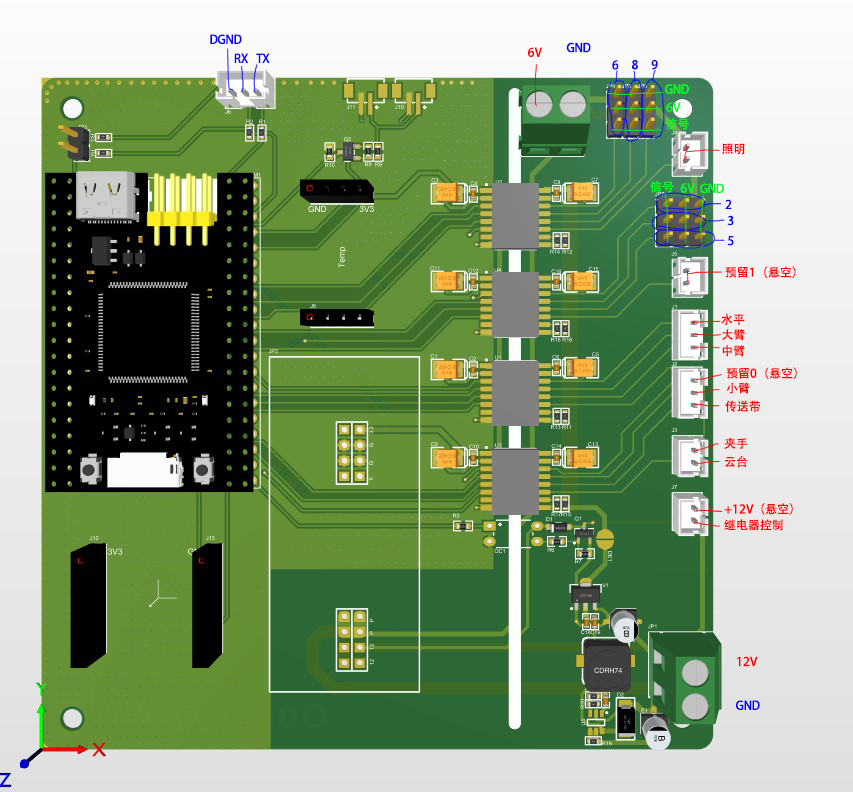
<style>
.page{position:relative;width:853px;height:792px}
.page>*{position:absolute;margin:0}
.t1{font:12px "AdobeHeitiStd-Regular";color:#0600ff}
.t2{font:12px "AdobeHeitiStd-Regular";color:#ff0000}
.t3{font:12px "AdobeHeitiStd-Regular";color:#00ff1e}
</style>
<div class="page">
<p class="t1" style="left:210px;top:34px;width:32px;height:10px">DGND</p>
<p class="t1" style="left:234px;top:53px;width:14px;height:10px">RX</p>
<p class="t1" style="left:256px;top:53px;width:14px;height:10px">TX</p>
<p class="t2" style="left:528px;top:47px;width:15px;height:10px">6V</p>
<p class="t1" style="left:566px;top:42px;width:25px;height:11px">GND</p>
<p class="t1" style="left:612px;top:60px;width:7px;height:10px">6</p>
<p class="t1" style="left:632px;top:60px;width:6px;height:10px">8</p>
<p class="t1" style="left:651px;top:59px;width:7px;height:11px">9</p>
<p class="t3" style="left:665px;top:84px;width:24px;height:10px">GND</p>
<p class="t3" style="left:666px;top:102px;width:15px;height:11px">6V</p>
<p class="t3" style="left:665px;top:118px;width:24px;height:12px">信号</p>
<p class="t2" style="left:722px;top:143px;width:23px;height:12px">照明</p>
<p class="t3" style="left:650px;top:181px;width:24px;height:12px">信号</p>
<p class="t3" style="left:680px;top:183px;width:15px;height:10px">6V</p>
<p class="t3" style="left:700px;top:183px;width:24px;height:11px">GND</p>
<p class="t1" style="left:725px;top:199px;width:7px;height:10px">2</p>
<p class="t1" style="left:727px;top:215px;width:7px;height:11px">3</p>
<p class="t1" style="left:727px;top:236px;width:7px;height:10px">5</p>
<p class="t2" style="left:725px;top:266px;width:71px;height:12px">预留1（悬空）</p>
<p class="t2" style="left:721px;top:313px;width:24px;height:12px">水平</p>
<p class="t2" style="left:722px;top:329px;width:23px;height:12px">大臂</p>
<p class="t2" style="left:722px;top:345px;width:23px;height:12px">中臂</p>
<p class="t2" style="left:726px;top:367px;width:71px;height:12px">预留0（悬空）</p>
<p class="t2" style="left:726px;top:382px;width:24px;height:12px">小臂</p>
<p class="t2" style="left:725px;top:400px;width:35px;height:12px">传送带</p>
<p class="t2" style="left:724px;top:437px;width:24px;height:12px">夹手</p>
<p class="t2" style="left:725px;top:456px;width:22px;height:12px">云台</p>
<p class="t2" style="left:724px;top:503px;width:69px;height:12px">+12V（悬空）</p>
<p class="t2" style="left:724px;top:519px;width:59px;height:12px">继电器控制</p>
<p class="t2" style="left:737px;top:656px;width:21px;height:11px">12V</p>
<p class="t1" style="left:736px;top:700px;width:24px;height:10px">GND</p>
</div>
